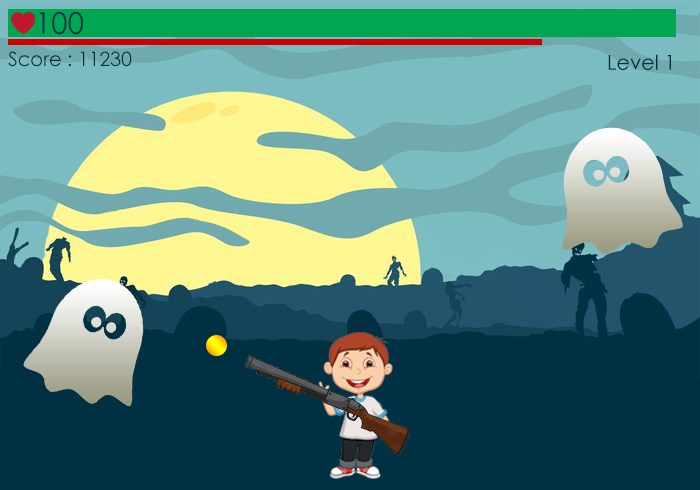
<style>
.page{position:relative;width:700px;height:490px;background:#003142}
.page>*{position:absolute;margin:0}
.t1{font:30px "CenturyGothic";color:#003142}
.t2{font:19.7px "CenturyGothic";color:#003142}
.t3{font:20.6px "CenturyGothic";color:#003142}
</style>
<div class="page">
<p class="t1" style="left:39px;top:11px;width:44px;height:24px">100</p>
<p class="t2" style="left:8px;top:51px;width:124px;height:16px">Score : 11230</p>
<p class="t3" style="left:608px;top:54px;width:63px;height:16px">Level 1</p>
</div>
